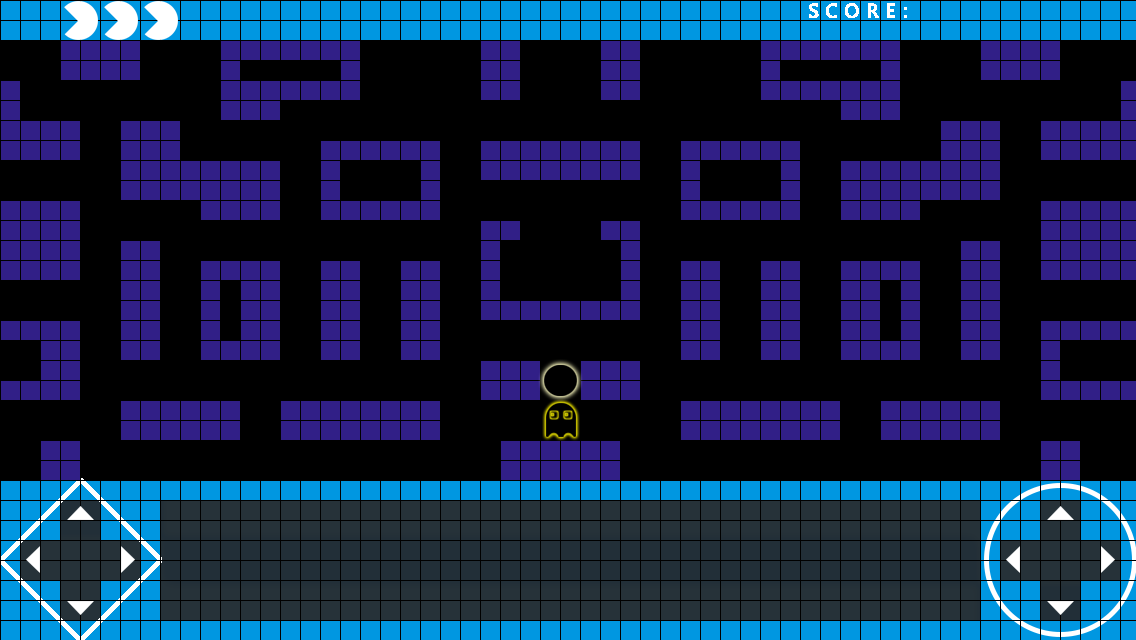
<style>
.page{position:relative;width:1136px;height:640px;background:#000000}
.page>*{position:absolute;margin:0}
.t1{font:18px "MicrosoftYaHei";letter-spacing:0.005em;color:#ffffff;text-transform:uppercase;font-weight:bold}
</style>
<div class="page">
<p class="t1" style="left:809px;top:3px;width:98px;height:15px">S C O R E :</p>
</div>
